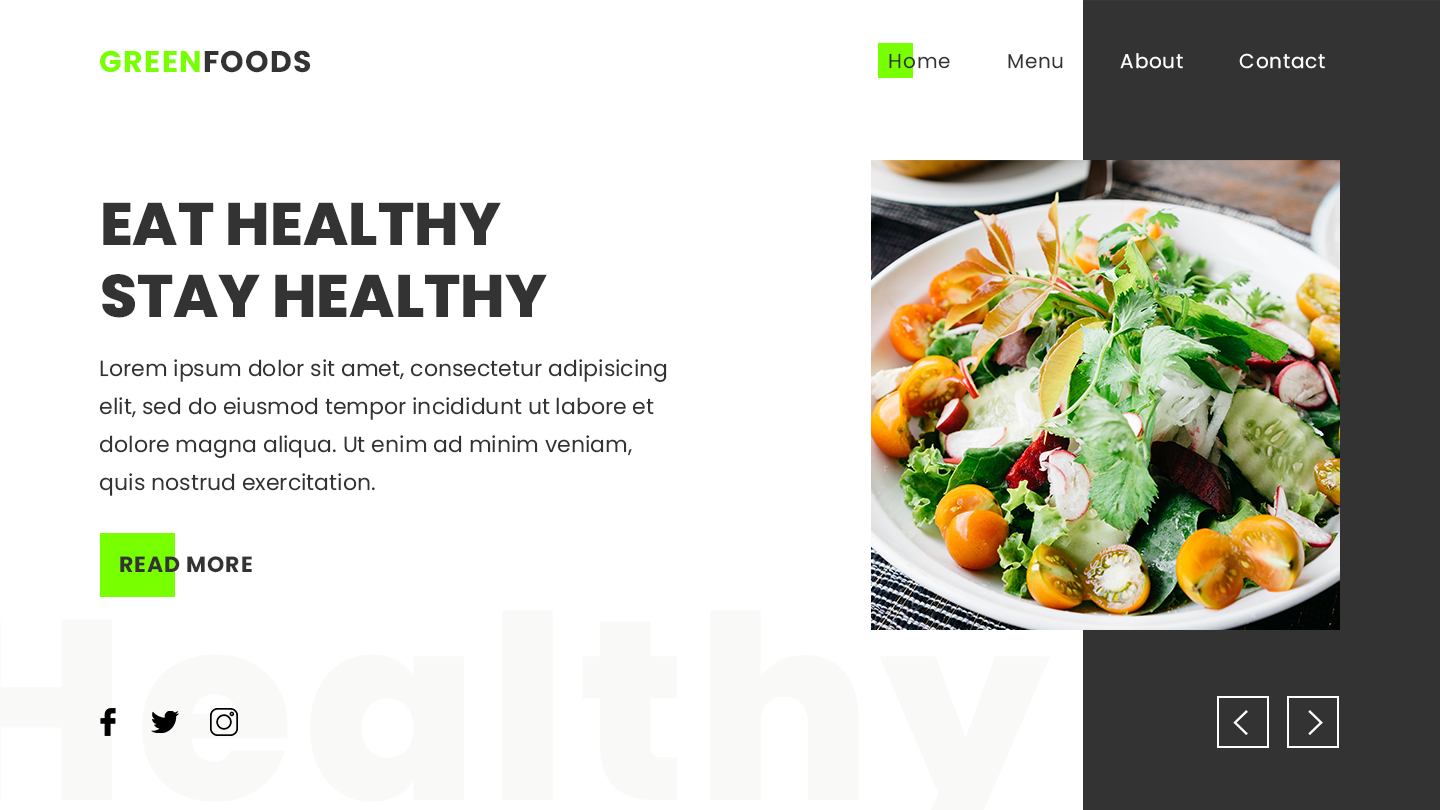
<style>
.page{position:relative;width:1440px;height:810px;background:#ffffff}
.page>*{position:absolute;margin:0}
.t1{font:30px "Poppins-Bold";letter-spacing:0.04em;color:#78ff00;text-transform:uppercase}
.t2{font:30px "Poppins-Bold";letter-spacing:0.04em;color:#333333;text-transform:uppercase}
.t3{font:60px "Poppins-ExtraBold";color:#333333;text-transform:uppercase}
.t4{font:22px/38px "Poppins-Regular";color:#333333}
.t5{font:22px "Poppins-Bold";letter-spacing:0.04em;color:#333333;text-transform:uppercase}
</style>
<div class="page">
<p class="t1" style="left:100px;top:50px;width:211px;height:23px">Green<span class="t2">Foods</span></p>
<p class="t3" style="left:102px;top:202px;width:445px;height:116px">EAT Healthy<br>Stay Healthy</p>
<p class="t4" style="left:99px;top:359px;width:568px;height:137px">Lorem ipsum dolor sit amet, consectetur adipisicing elit, sed do eiusmod tempor incididunt ut labore et dolore magna aliqua. Ut enim ad minim veniam, quis nostrud exercitation.</p>
<p class="t5" style="left:120px;top:556px;width:132px;height:17px">Read More</p>
</div>
